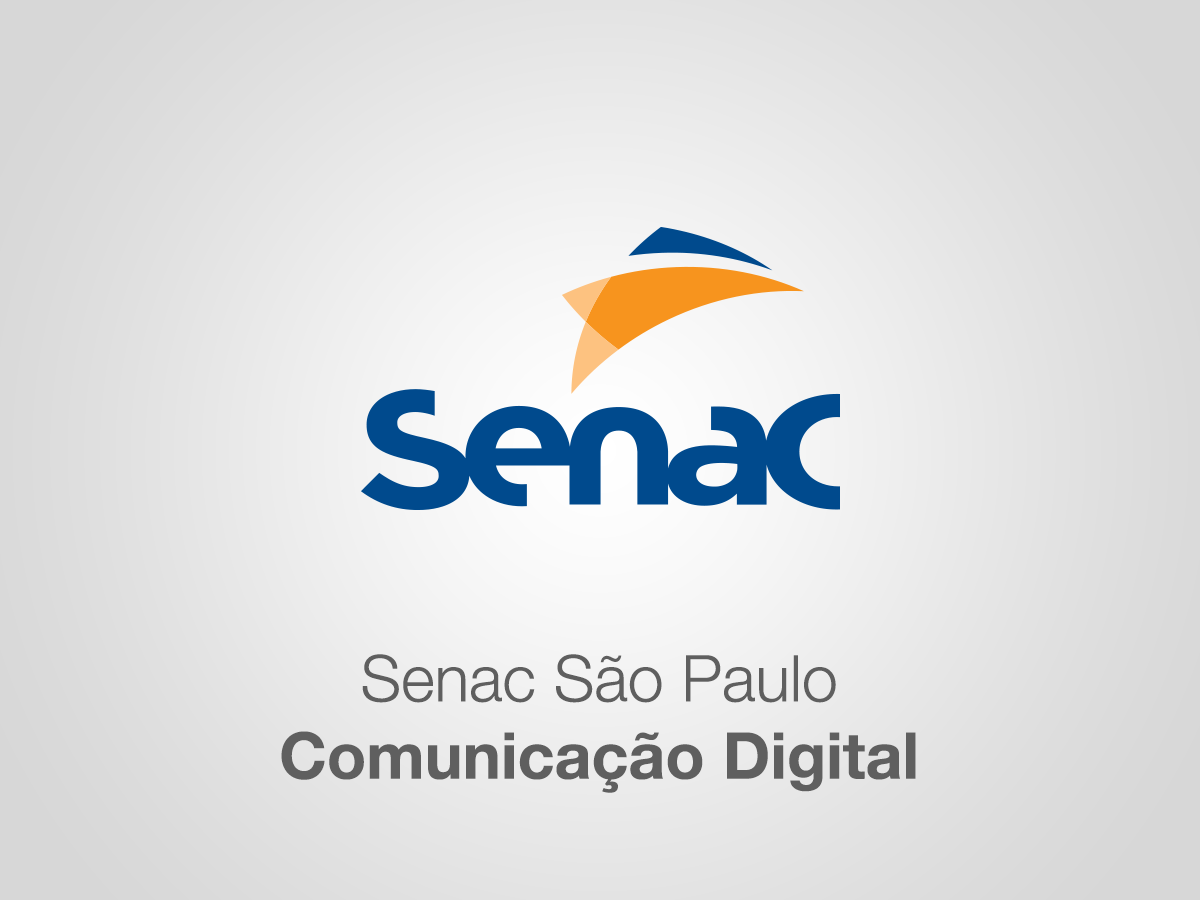
<style>
.page{position:relative;width:1200px;height:900px}
.page>*{position:absolute;margin:0}
.t1{font:64.4px "HelveticaNeueLTStd-Bd";color:#5f5f5f}
.t2{font:64.4px "HelveticaNeueLTStd-Lt";color:#5f5f5f}
</style>
<div class="page">
<p class="t1" style="left:281px;top:654px;width:635px;height:139px;text-align:center"><span class="t2">Senac São Paulo<br></span>Comunicação Digital</p>
</div>
